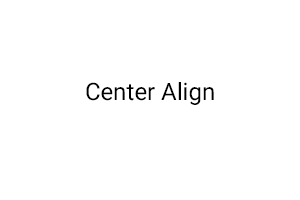
<style>
.page{position:relative;width:300px;height:200px;background:#ffffff}
.page>*{position:absolute;margin:0}
.t1{font:24px "Roboto-Regular";color:#000000}
</style>
<div class="page">
<p class="t1" style="left:86px;top:82px;width:128px;height:23px">Center Align</p>
</div>
